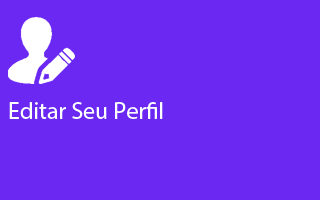
<style>
.page{position:relative;width:320px;height:200px;background:#6b28f3}
.page>*{position:absolute;margin:0}
.t1{font:24px "MyriadPro-Regular";color:#feffff}
</style>
<div class="page">
<p class="t1" style="left:9px;top:102px;width:154px;height:17px">Editar Seu Perfil</p>
</div>
